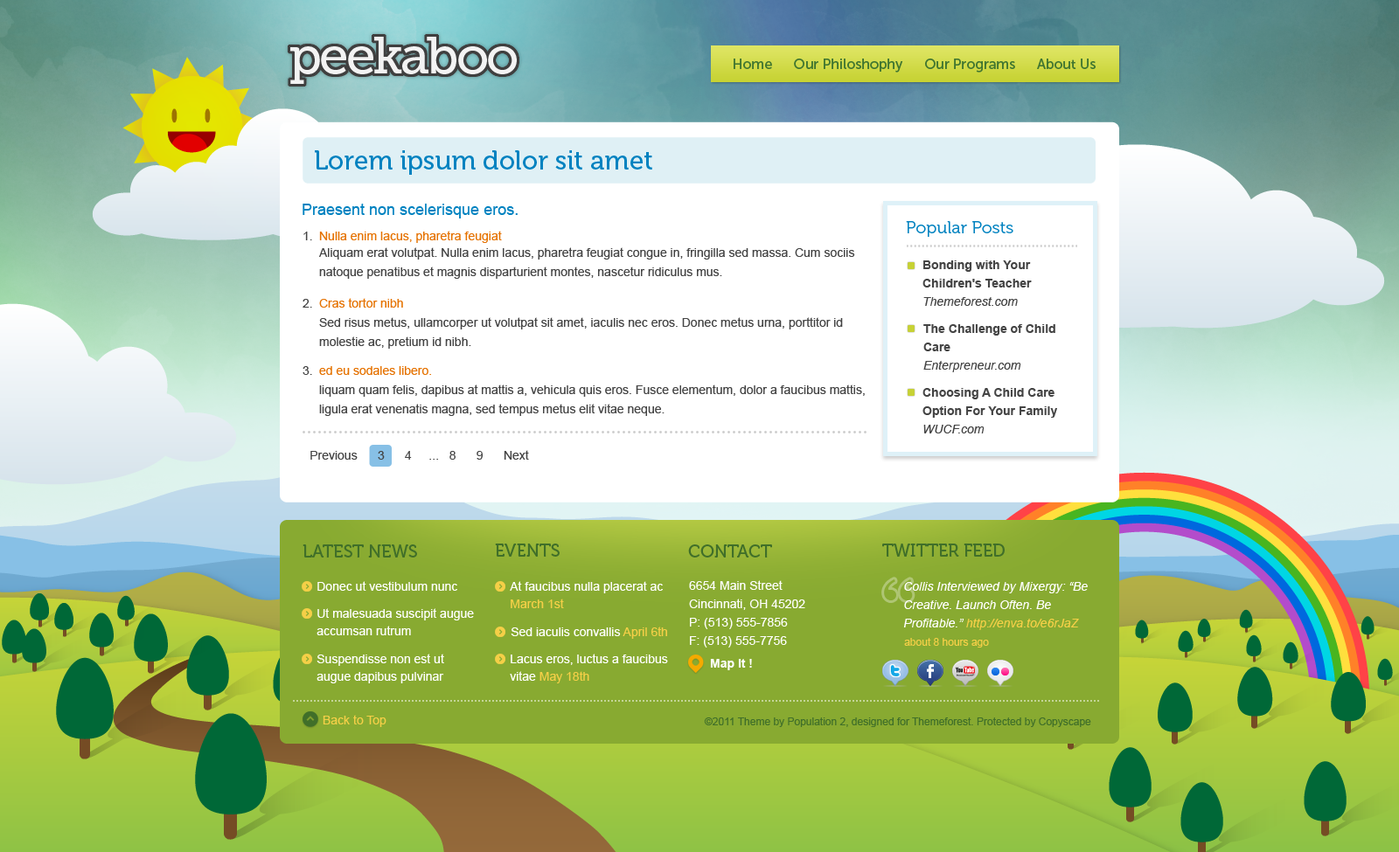
<style>
.page{position:relative;width:1399px;height:852px}
.page>*{position:absolute;margin:0}
.t1{font:14px "MuseoSans-500";color:#417630}
.t2{font:26.2px "Museo-500";color:#0082c0}
.t3{font:15.7px "ArialMT";color:#0082c0}
.t4{font:17.5px "Museo-300";color:#0082c0}
.t5{font:12.2px "ArialMT";color:#444444}
.t6{font:12.2px "ArialMT";color:#e57200}
.t7{font:12.2px/19.2px "ArialMT";color:#444444}
.t8{font:12.2px/18.4px "Arial-BoldMT";color:#444444}
.t9{font:12.2px/18.4px "Arial-ItalicMT";color:#444444}
.t10{font:17.5px "Museo-500";color:#406f29;text-transform:uppercase}
.t11{font:12.2px "ArialMT";color:#ffffff}
.t12{font:12.2px/17.5px "ArialMT";color:#ffffff}
.t13{font:12.2px/17.5px "ArialMT";color:#f5cf47}
.t14{font:12.2px/18.4px "ArialMT";color:#ffffff}
.t15{font:12.2px/18.4px "Arial-ItalicMT";color:#ffffff}
.t16{font:12.2px/18.4px "Arial-ItalicMT";color:#f5cf47}
.t17{font:12.2px "ArialMT";color:#f5cf47}
.t18{font:10.5px "ArialMT";color:#f5cf47}
.t19{font:12.2px "Arial-BoldMT";color:#ffffff}
.t20{font:10.5px "ArialMT";color:#406f29}
</style>
<div class="page">
<p class="t1" style="left:734px;top:59px;width:361px;height:14px">Home      Our Philoshophy      Our Programs      About Us</p>
<p class="t2" style="left:315px;top:150px;width:337px;height:25px">Lorem ipsum dolor sit amet</p>
<p class="t3" style="left:303px;top:204px;width:215px;height:15px">Praesent non scelerisque eros.</p>
<p class="t4" style="left:906px;top:221px;width:107px;height:16px">Popular Posts</p>
<p class="t5" style="left:303px;top:232px;width:9px;height:8px">1.</p>
<p class="t6" style="left:319px;top:231px;width:183px;height:12px">Nulla enim lacus, pharetra feugiat</p>
<p class="t7" style="left:319px;top:247px;width:536px;height:32px">Aliquam erat volutpat. Nulla enim lacus, pharetra feugiat congue in, fringilla sed massa. Cum sociis natoque penatibus et magnis disparturient montes, nascetur ridiculus mus.</p>
<p class="t8" style="left:922px;top:261px;width:110px;height:45px">Bonding with Your Children's Teacher<br><span class="t9">Themeforest.com</span></p>
<p class="t5" style="left:303px;top:299px;width:9px;height:9px">2.</p>
<p class="t6" style="left:319px;top:298px;width:84px;height:10px">Cras tortor nibh</p>
<p class="t7" style="left:319px;top:317px;width:524px;height:32px">Sed risus metus, ullamcorper ut volutpat sit amet, iaculis nec eros. Donec metus urna, porttitor id molestie ac, pretium id nibh.</p>
<p class="t8" style="left:923px;top:324px;width:132px;height:48px">The Challenge of Child Care<br><span class="t9">Enterpreneur.com</span></p>
<p class="t5" style="left:303px;top:366px;width:9px;height:9px">3.</p>
<p class="t6" style="left:319px;top:366px;width:112px;height:9px">ed eu sodales libero.</p>
<p class="t7" style="left:319px;top:385px;width:546px;height:31px">liquam quam felis, dapibus at mattis a, vehicula quis eros. Fusce elementum, dolor a faucibus mattis, ligula erat venenatis magna, sed tempus metus elit vitae neque.</p>
<p class="t8" style="left:922px;top:388px;width:135px;height:46px">Choosing A Child Care Option For Your Family<br><span class="t9">WUCF.com</span></p>
<p class="t5" style="left:310px;top:450px;width:219px;height:10px">Previous      3      4     ...   8      9      Next</p>
<p class="t10" style="left:303px;top:545px;width:114px;height:13px">Latest News</p>
<p class="t10" style="left:495px;top:544px;width:65px;height:13px">Events</p>
<p class="t10" style="left:688px;top:545px;width:84px;height:13px">Contact</p>
<p class="t10" style="left:882px;top:544px;width:123px;height:13px">Twitter feed</p>
<p class="t11" style="left:317px;top:581px;width:140px;height:10px">Donec ut vestibulum nunc</p>
<p class="t12" style="left:510px;top:581px;width:153px;height:28px">At faucibus nulla placerat ac <span class="t13">March 1st</span></p>
<p class="t14" style="left:689px;top:581px;width:116px;height:67px">6654 Main Street<br>Cincinnati, OH 45202<br>P: (513) 555-7856<br>F: (513) 555-7756</p>
<p class="t15" style="left:903px;top:582px;width:185px;height:48px">Collis Interviewed by Mixergy: “Be Creative. Launch Often. Be<br>Profitable.” <span class="t16">http://enva.to/e6rJaZ</span></p>
<p class="t12" style="left:316px;top:609px;width:158px;height:27px">Ut malesuada suscipit augue accumsan rutrum</p>
<p class="t11" style="left:511px;top:627px;width:156px;height:12px">Sed iaculis convallis <span class="t17">April 6th</span></p>
<p class="t18" style="left:904px;top:638px;width:85px;height:10px">about 8 hours ago</p>
<p class="t12" style="left:316px;top:654px;width:128px;height:30px">Suspendisse non est ut augue dapibus pulvinar</p>
<p class="t12" style="left:510px;top:654px;width:158px;height:30px">Lacus eros, luctus a faucibus vitae <span class="t13">May 18th</span></p>
<p class="t19" style="left:710px;top:659px;width:42px;height:12px">Map It !</p>
<p class="t17" style="left:323px;top:715px;width:63px;height:12px">Back to Top</p>
<p class="t20" style="left:704px;top:718px;width:387px;height:9px">©2011 Theme by Population 2, designed for Themeforest. Protected by Copyscape</p>
</div>
